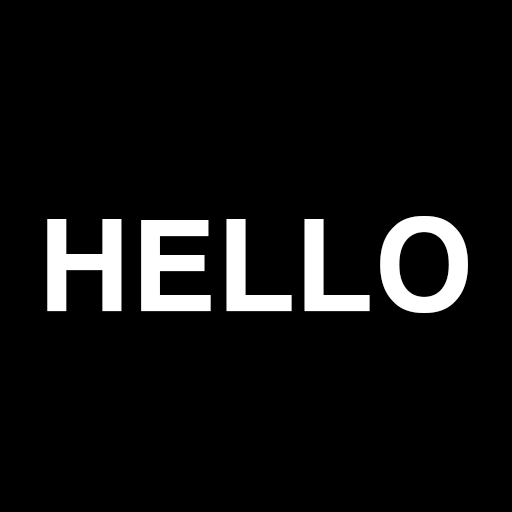
<style>
.page{position:relative;width:512px;height:512px;background:#000000}
.page>*{position:absolute;margin:0}
.t1{font:127px "Helvetica-Bold";letter-spacing:0.01em;color:#ffffff}
</style>
<div class="page">
<p class="t1" style="left:47px;top:216px;width:421px;height:97px">HELLO</p>
</div>
